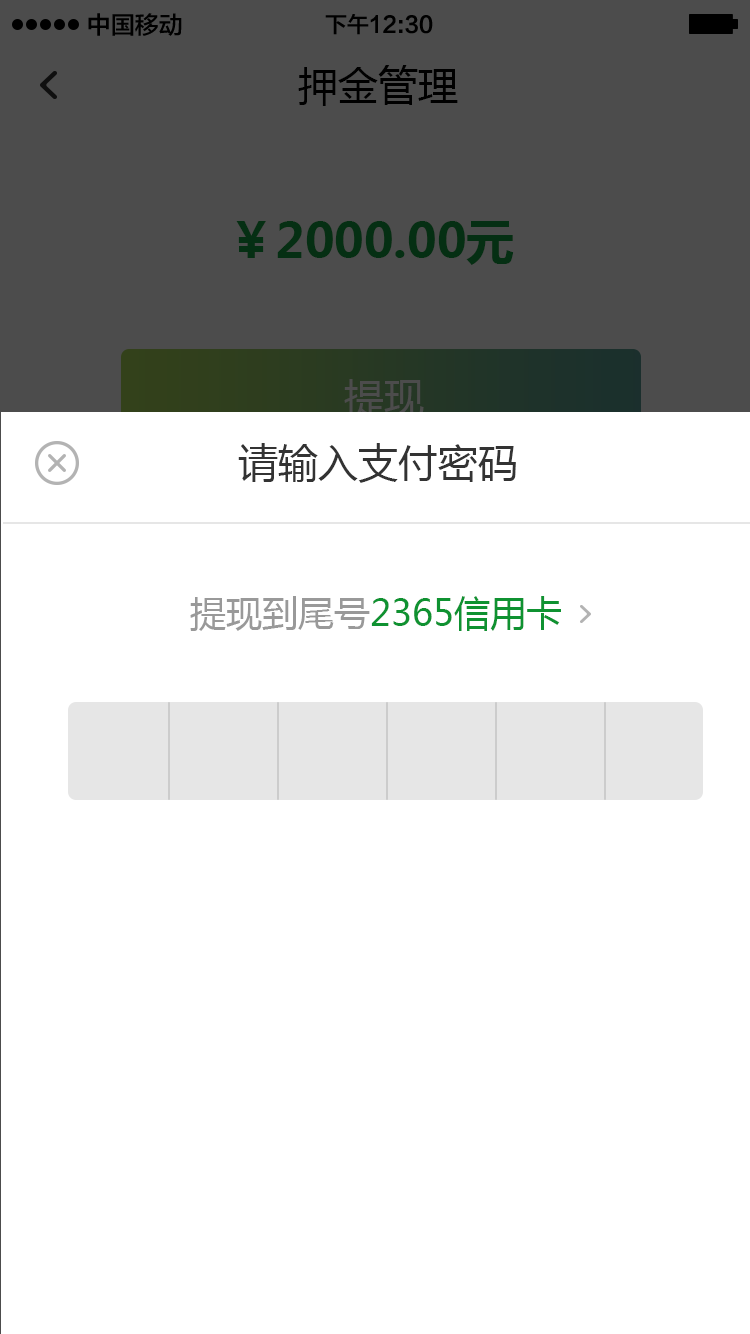
<style>
.page{position:relative;width:750px;height:1334px;background:#ffffff}
.page>*{position:absolute;margin:0}
.t1{font:24px "FZLTZHK--GBK1-0";color:#000000}
.t2{font:22px "FZLTZHK--GBK1-0";color:#000000}
.t3{font:40px "MicrosoftYaHei";color:#000000}
.t4{font:48px "MicrosoftYaHei-Bold";color:#052f13}
.t5{font:40px "MicrosoftYaHei";color:#333333}
.t6{font:36px "MicrosoftYaHei";color:#0f9231}
.t7{font:36px "MicrosoftYaHei";color:#999999}
</style>
<div class="page">
<p class="t1" style="left:88px;top:13px;width:94px;height:23px">中国移动</p>
<p class="t2" style="left:325px;top:14px;width:108px;height:21px">下午12:30</p>
<p class="t3" style="left:298px;top:65px;width:160px;height:41px">押金管理</p>
<p class="t4" style="left:236px;top:221px;width:278px;height:44px">￥2000.00元</p>
<p class="t5" style="left:238px;top:443px;width:278px;height:40px">请输入支付密码</p>
<p class="t6" style="left:190px;top:596px;width:371px;height:35px"><span class="t7">提现到尾号</span>2365信用卡</p>
</div>
